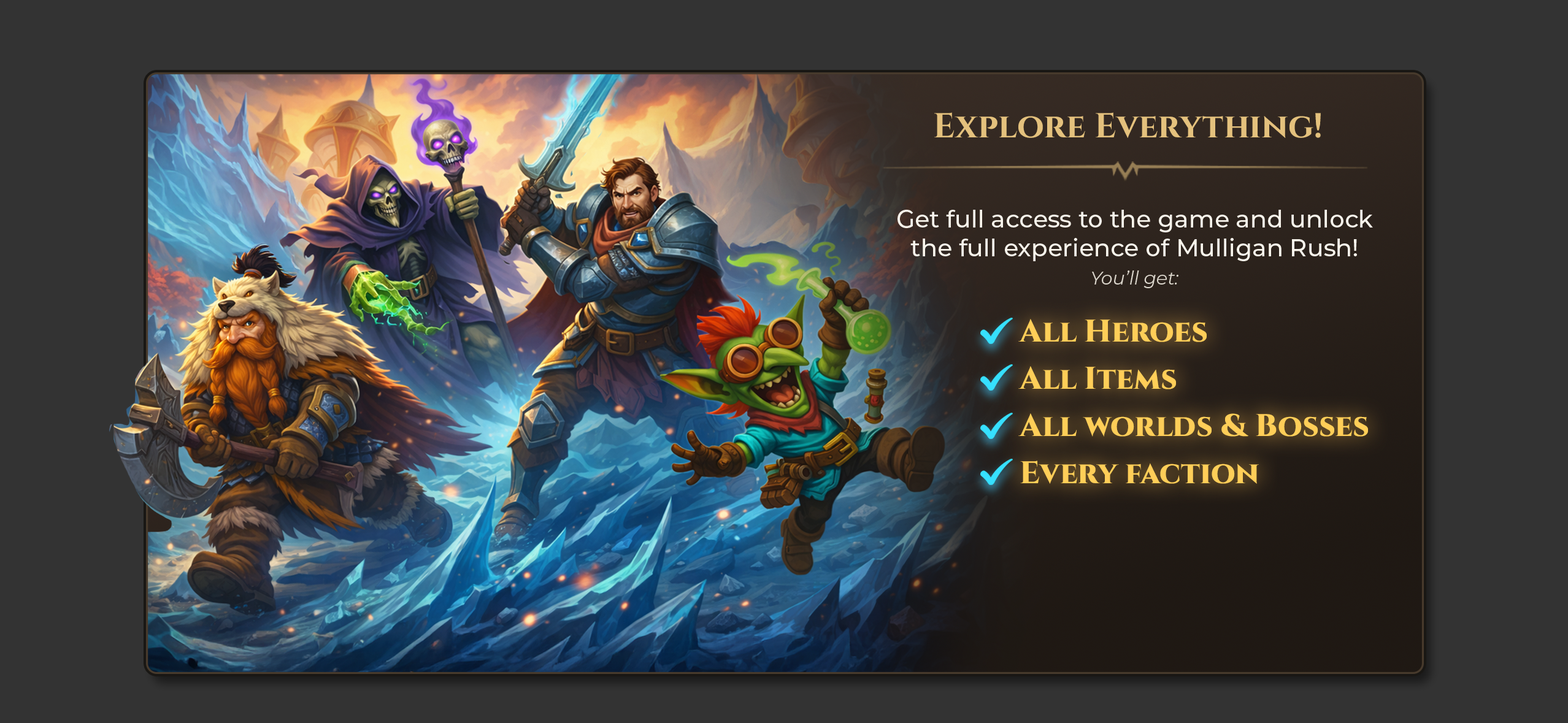
<style>
.page{position:relative;width:1568px;height:723px;background:#333333}
.page>*{position:absolute;margin:0}
.t1{font:34.5px "Cinzel-Bold";color:#e4c17d}
.t2{font:24.2px "Montserrat-Medium";color:#f9f5ec}
.t3{font:18.4px/28.2px "Montserrat-Italic";color:#ddd8ce}
.t4{font:31.3px/47.3px "Cinzel-ExtraBold";color:#ffce58}
</style>
<div class="page">
<p class="t1" style="left:934px;top:112px;width:387px;height:26px">Explore Everything!</p>
<p class="t2" style="left:897px;top:210px;width:476px;height:78px;text-align:center">Get full access to the game and unlock<br>the full experience of Mulligan Rush!<br><span class="t3">You’ll get:</span></p>
<p class="t4" style="left:1018px;top:319px;width:350px;height:165px">All Heroes<br>All Items<br>All worlds &amp; Bosses<br>Every faction</p>
</div>
